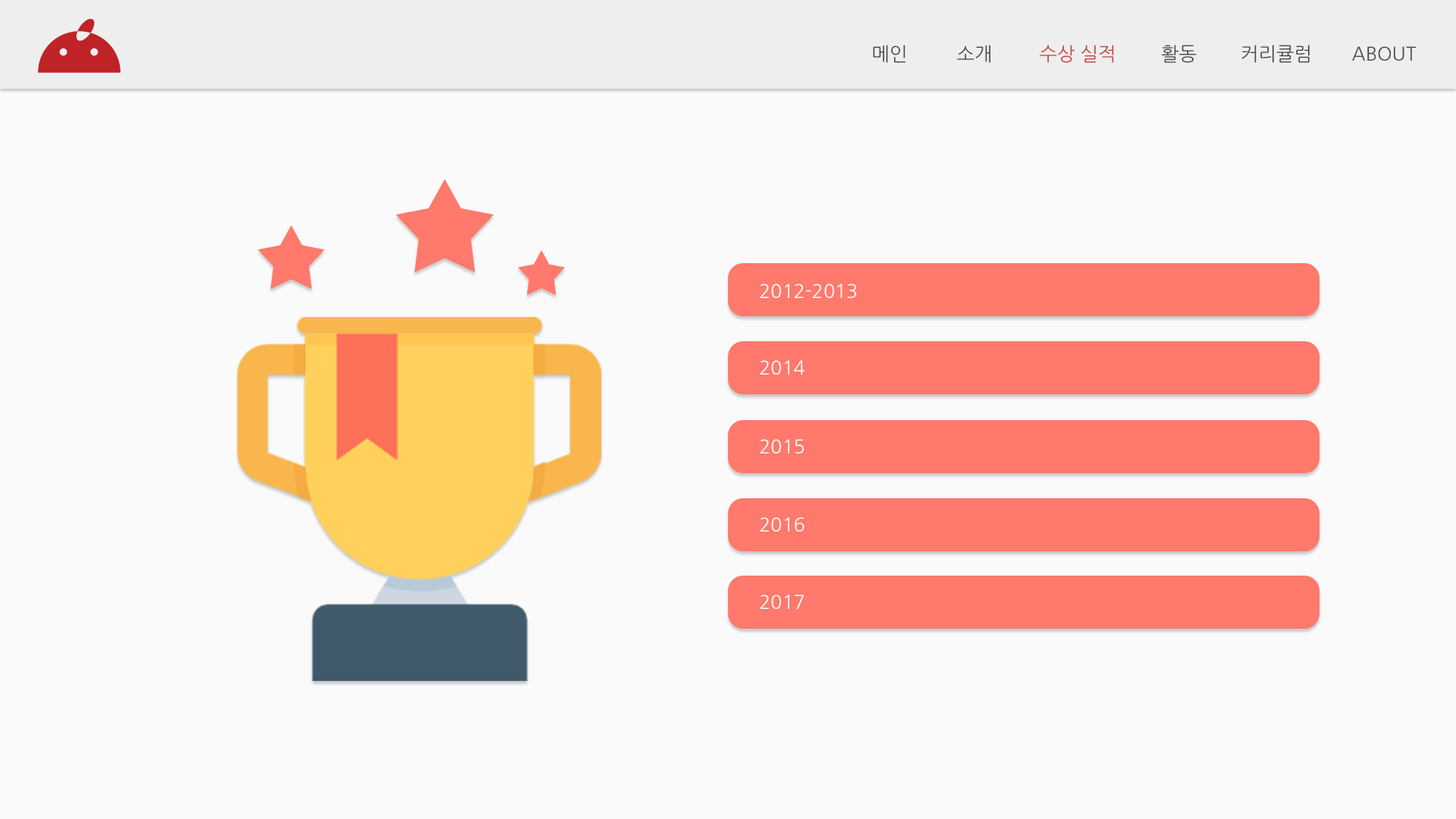
<style>
.page{position:relative;width:1456px;height:819px;background:#fafafa}
.page>*{position:absolute;margin:0}
.t1{font:19px "NanumGothic";color:#464646}
.t2{font:19px "NanumGothic";color:#cb3d3d}
.t3{font:19px "NanumGothic";color:#ffffff}
</style>
<div class="page">
<p class="t1" style="left:873px;top:45px;width:32px;height:18px">메인</p>
<p class="t1" style="left:957px;top:45px;width:33px;height:18px">소개</p>
<p class="t2" style="left:1040px;top:45px;width:74px;height:18px">수상 실적</p>
<p class="t1" style="left:1162px;top:45px;width:35px;height:18px">활동</p>
<p class="t1" style="left:1241px;top:45px;width:69px;height:18px">커리큘럼</p>
<p class="t1" style="left:1352px;top:46px;width:65px;height:15px">ABOUT</p>
<p class="t3" style="left:760px;top:284px;width:96px;height:14px">2012-2013</p>
<p class="t3" style="left:760px;top:360px;width:45px;height:15px">2014</p>
<p class="t3" style="left:760px;top:439px;width:44px;height:14px">2015</p>
<p class="t3" style="left:760px;top:517px;width:45px;height:15px">2016</p>
<p class="t3" style="left:760px;top:595px;width:44px;height:14px">2017</p>
</div>
